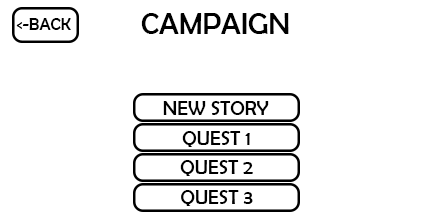
<style>
.page{position:relative;width:432px;height:216px;background:#ffffff}
.page>*{position:absolute;margin:0}
.t1{font:30px "BerlinSansFB-Reg";color:#000000}
.t2{font:17px "BerlinSansFB-Reg";color:#000000}
.t3{font:20px "BerlinSansFB-Reg";color:#000000}
</style>
<div class="page">
<p class="t1" style="left:141px;top:13px;width:148px;height:21px">CAMPAIGN</p>
<p class="t2" style="left:16px;top:18px;width:55px;height:12px">&lt;-BACK</p>
<p class="t3" style="left:163px;top:101px;width:106px;height:14px">NEW STORY</p>
<p class="t3" style="left:182px;top:131px;width:68px;height:16px">QUEST 1</p>
<p class="t3" style="left:180px;top:160px;width:73px;height:16px">QUEST 2</p>
<p class="t3" style="left:181px;top:190px;width:72px;height:16px">QUEST 3</p>
</div>
